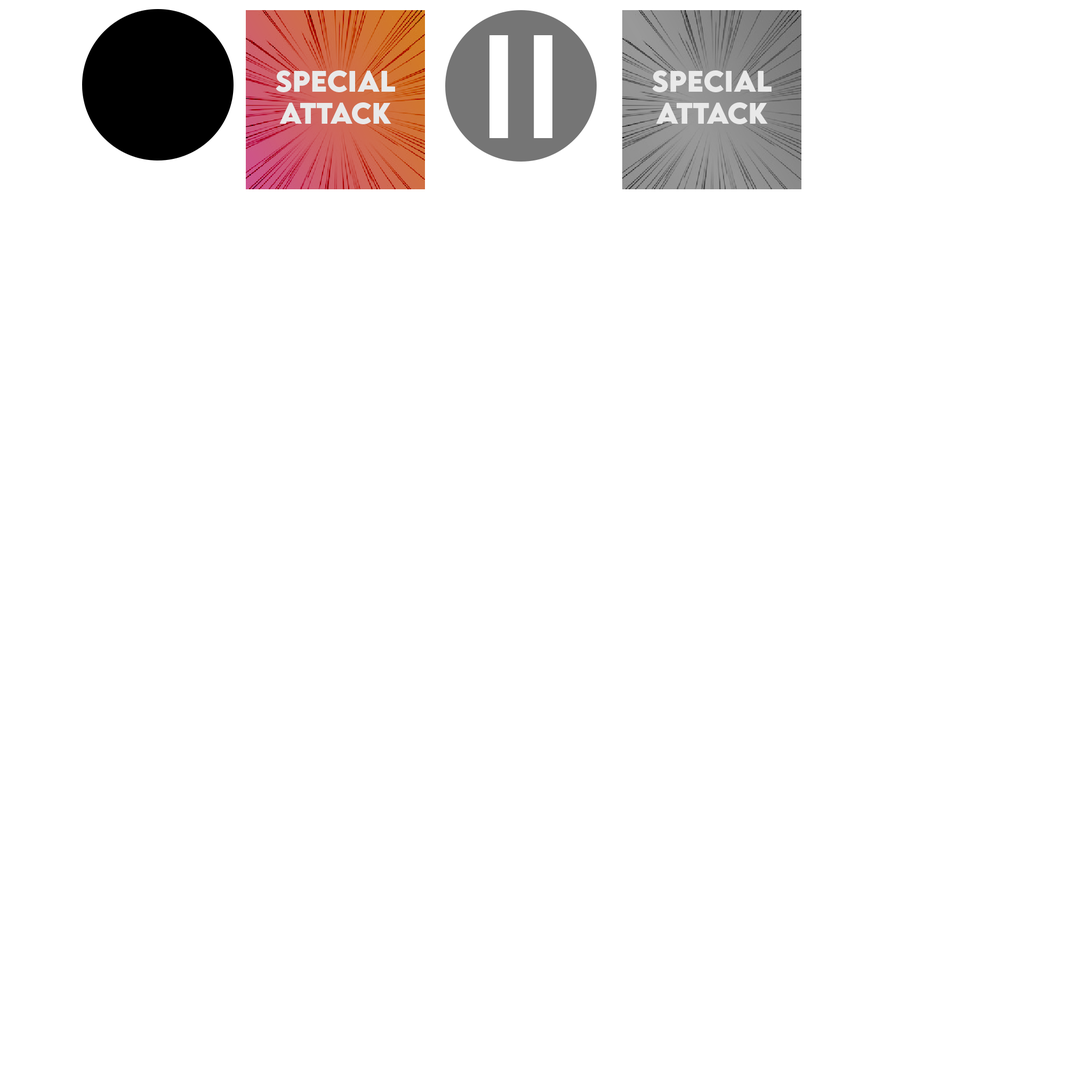
<style>
.page{position:relative;width:1092px;height:1092px;background:#ffffff}
.page>*{position:absolute;margin:0}
.t1{font:26.7px "LEMONMILK-Bold";color:#e9e9e9}
</style>
<div class="page">
<p class="t1" style="left:276px;top:70px;width:119px;height:54px;text-align:center">SPECIAL<br>ATTACK</p>
</div>
